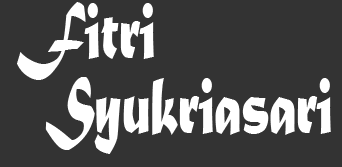
<style>
.page{position:relative;width:342px;height:167px;background:#333333}
.page>*{position:absolute;margin:0}
.t1{font:85px "MaturaMTScriptCapitals";letter-spacing:-0.025em;color:#ffffff;scale:0.67 1}
</style>
<div class="page">
<p class="t1" style="left:17px;top:2px;width:137px;height:78px">Fitri</p>
<p class="t1" style="left:45px;top:77px;width:286px;height:77px">Syukriasari</p>
</div>
